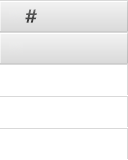
<style>
.page{position:relative;width:128px;height:160px;background:#ffffff}
.page>*{position:absolute;margin:0}
.t1{font:20.7px "SegoeUI-Bold";color:#4f4f4f}
</style>
<div class="page">
<p class="t1" style="left:25px;top:9px;width:12px;height:14px">#</p>
</div>
